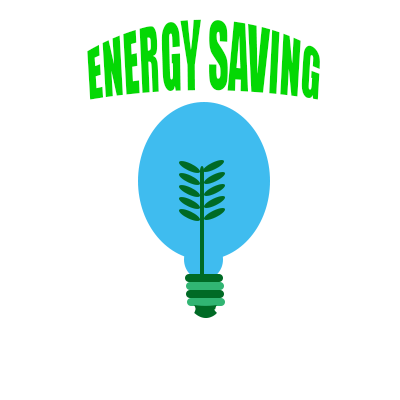
<style>
.page{position:relative;width:400px;height:400px;background:#ffffff}
.page>*{position:absolute;margin:0}
.t1{font:38.1px "Impact";color:#04d804}
</style>
<div class="page">
<p class="t1" style="left:87px;top:19px;width:233px;height:81px;text-align:center">ENERGY SAVING</p>
</div>
